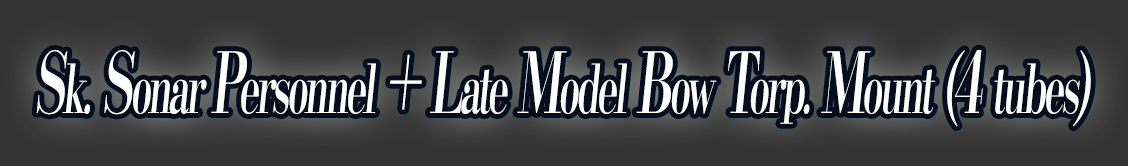
<style>
.page{position:relative;width:1128px;height:166px;background:#333333}
.page>*{position:absolute;margin:0}
.t1{font:67.2px "KochoStd-Heavy";letter-spacing:-0.08em;color:#ffffff;font-style:italic;scale:0.57 1}
.t2{font:84px "KochoStd-Heavy";letter-spacing:-0.08em;color:#ffffff;font-style:italic;scale:0.57 1}
</style>
<div class="page">
<p class="t1" style="left:36px;top:50px;width:1055px;height:77px"><span class="t2">S</span>k.<span class="t2"> S</span>onar <span class="t2">P</span>ersonnel<span class="t2"> + L</span>ate<span class="t2"> M</span>odel<span class="t2"> B</span>ow<span class="t2"> T</span>orp.<span class="t2"> M</span>ount<span class="t2"> (4 </span>tubes<span class="t2">)</span></p>
</div>
